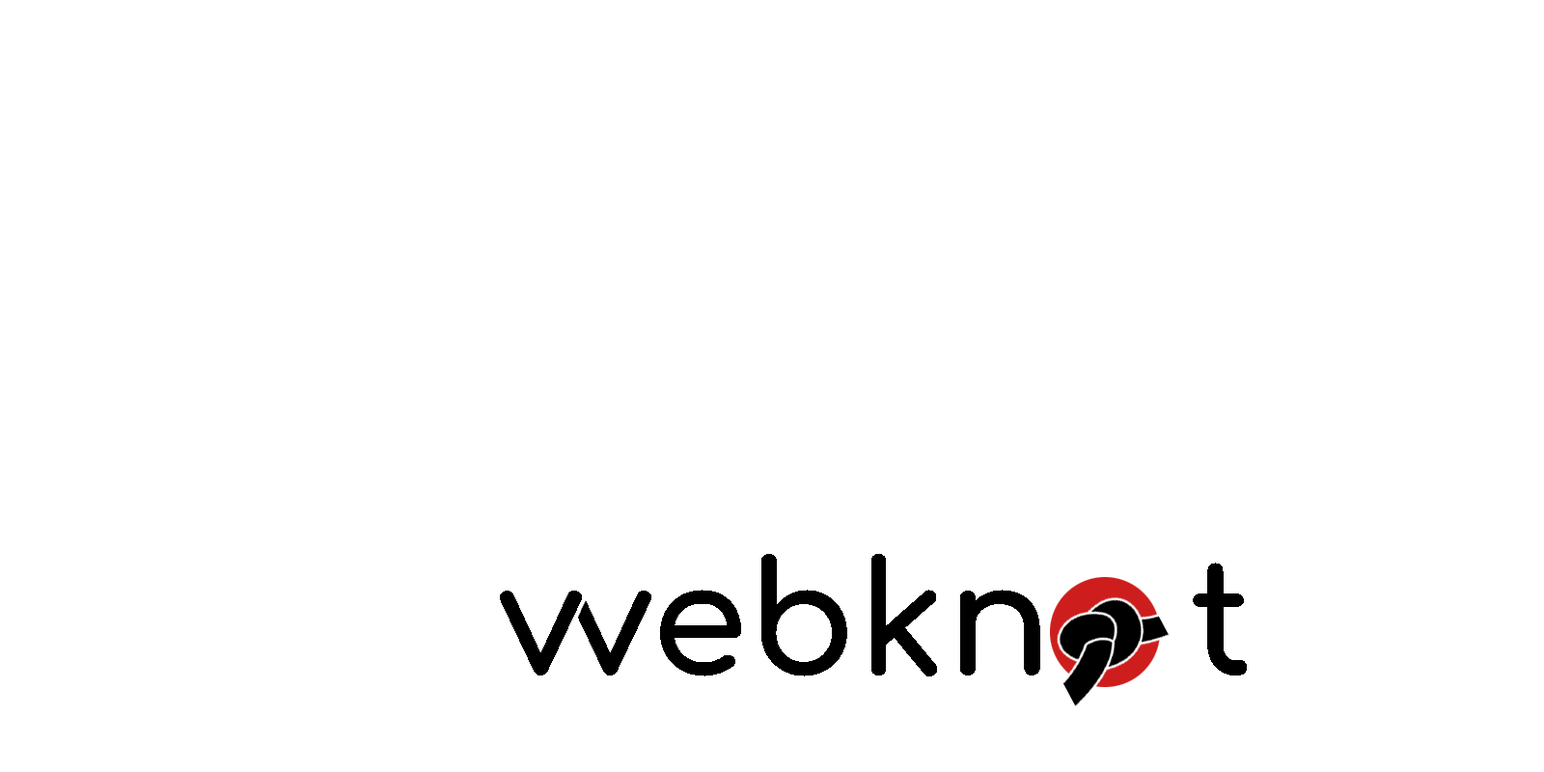
<style>
.page{position:relative;width:1544px;height:772px;background:#ffffff}
.page>*{position:absolute;margin:0}
.t1{font:156.4px "Comfortaa-Bold";color:#000000}
</style>
<div class="page">
<p class="t1" style="left:569px;top:554px;width:678px;height:123px">vebkn   t</p>
</div>
